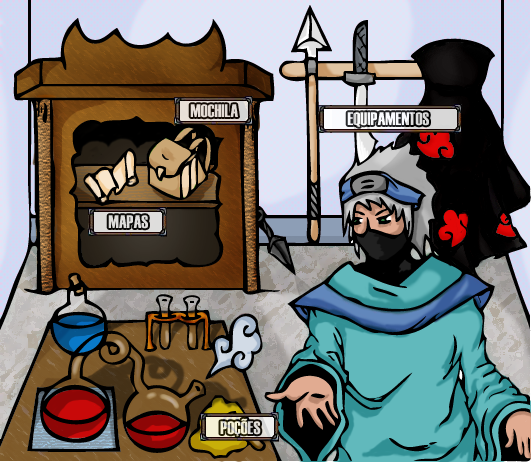
<style>
.page{position:relative;width:531px;height:462px}
.page>*{position:absolute;margin:0}
.t1{font:18px "Haettenschweiler";color:#e5ddd6}
.t2{font:18px "Haettenschweiler";color:#ffffff}
.t3{font:18px "Haettenschweiler";color:#dedddb}
.t4{font:18px "Haettenschweiler";color:#ece8d6}
</style>
<div class="page">
<p class="t1" style="left:190px;top:104px;width:48px;height:14px">MOCHILA</p>
<p class="t2" style="left:347px;top:112px;width:82px;height:15px">EQUIPAMENTOS</p>
<p class="t3" style="left:108px;top:215px;width:40px;height:14px">MAPAS</p>
<p class="t4" style="left:220px;top:418px;width:41px;height:19px">POÇÕES</p>
</div>
